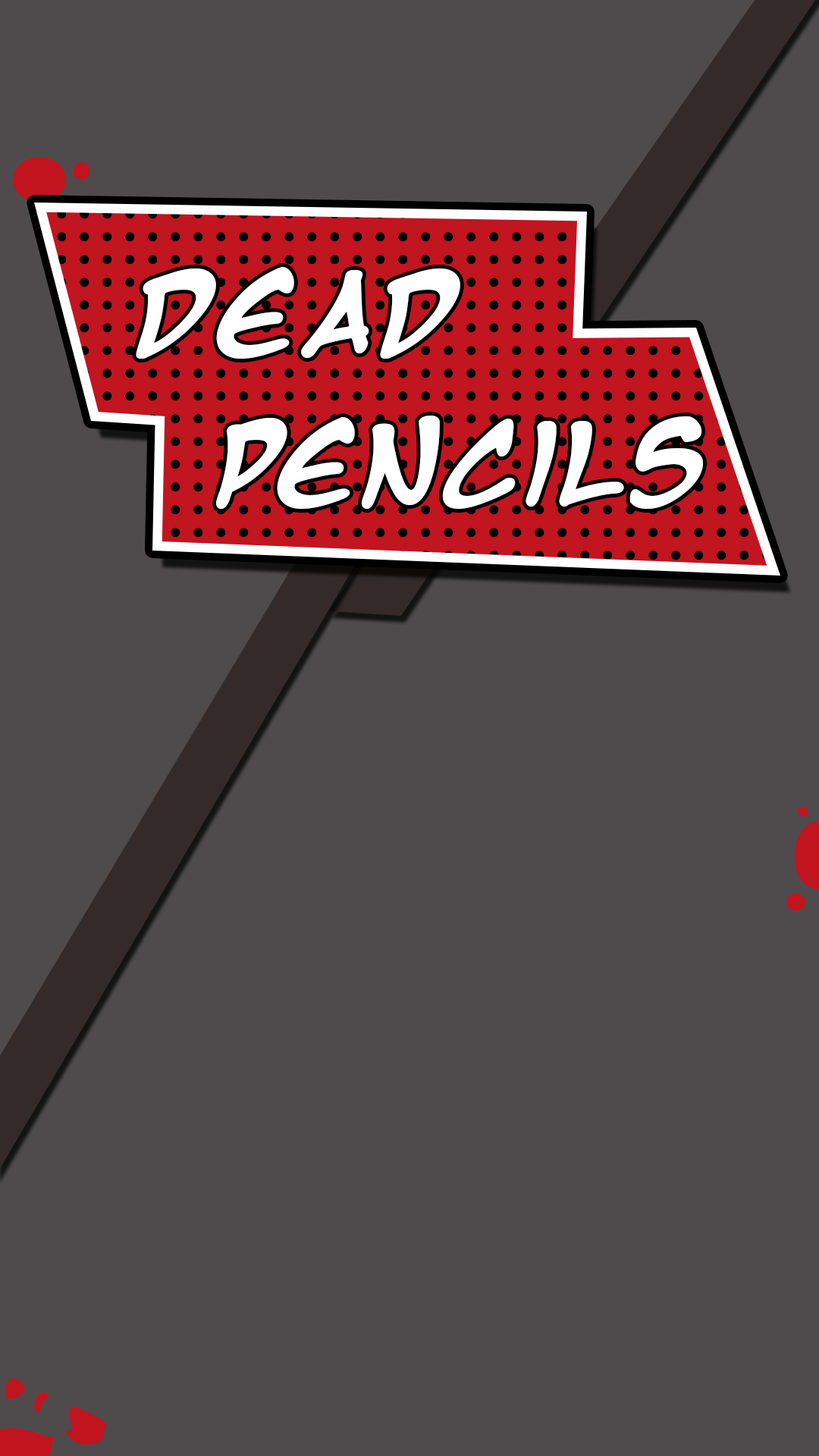
<style>
.page{position:relative;width:819px;height:1456px;background:#4f4b4c}
.page>*{position:absolute;margin:0}
.t1{font:94.8px "MangaTempleBold";color:#ffffff}
</style>
<div class="page">
<p class="t1" style="left:136px;top:267px;width:324px;height:92px">Dead</p>
<p class="t1" style="left:215px;top:416px;width:489px;height:93px">Pencils</p>
</div>
